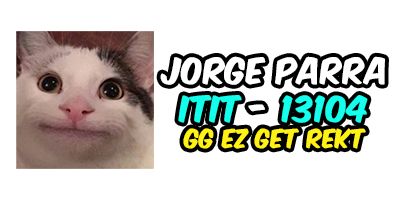
<style>
.page{position:relative;width:400px;height:200px;background:#ffffff}
.page>*{position:absolute;margin:0}
.t1{font:22.3px "KomikaAxis";color:#fff115}
.t2{font:31.1px "KomikaAxis";color:#ffffff}
.t3{font:31.1px "KomikaAxis";color:#13ffec}
.t4{font:31.1px "KomikaAxis";color:#14ffec}
</style>
<div class="page">
<p class="t1" style="left:160px;top:56px;width:225px;height:93px;text-align:center"><span class="t2">Jorge Parra<br></span><span class="t3">ITIT</span><span class="t2"> - </span><span class="t4">13104<br></span>gg ez get rekt</p>
</div>
